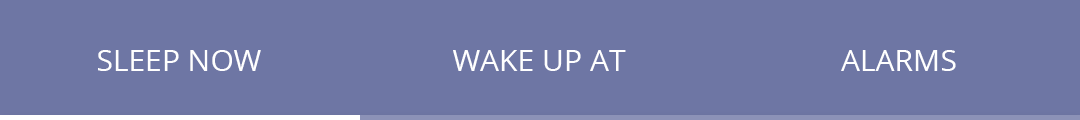
<style>
.page{position:relative;width:1080px;height:120px;background:#6e76a4}
.page>*{position:absolute;margin:0}
.t1{font:30px "OpenSans-Regular";color:#ffffff}
</style>
<div class="page">
<p class="t1" style="left:98px;top:50px;width:163px;height:21px">SLEEP NOW</p>
<p class="t1" style="left:453px;top:50px;width:173px;height:21px">WAKE UP AT</p>
<p class="t1" style="left:841px;top:50px;width:115px;height:21px">ALARMS</p>
</div>
